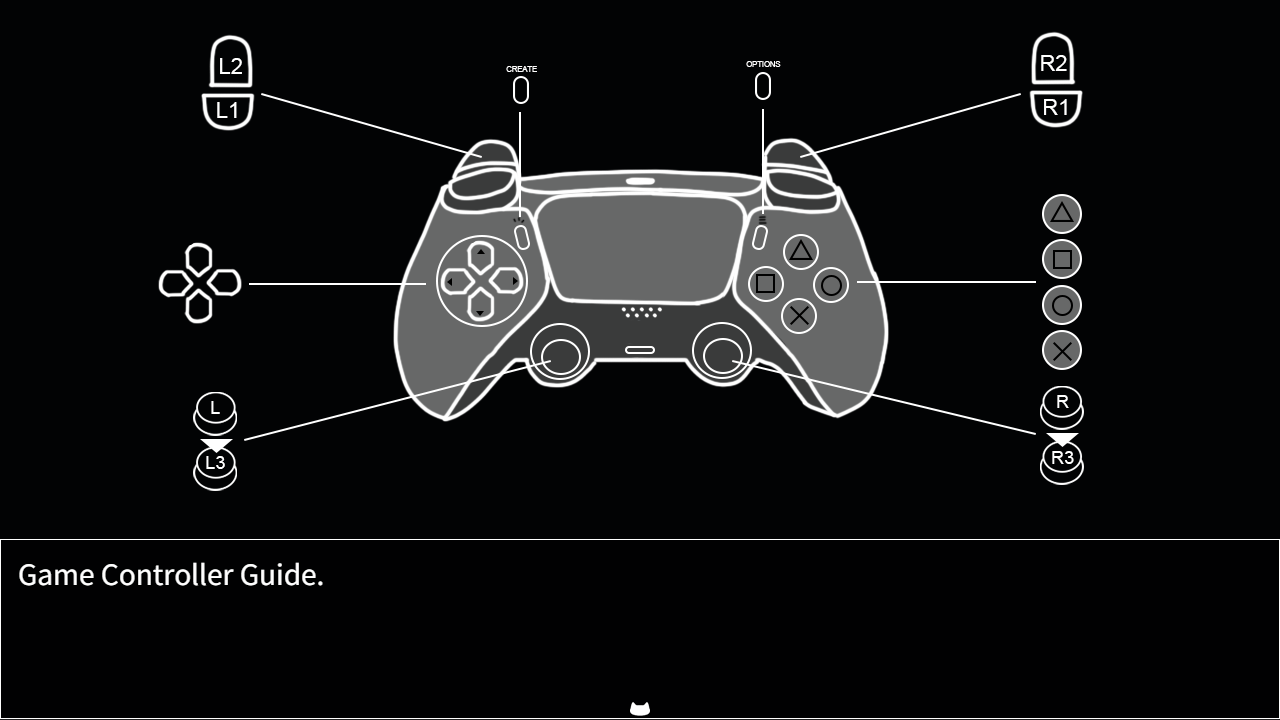
<style>
.page{position:relative;width:1280px;height:720px;background:#020304}
.page>*{position:absolute;margin:0}
.t1{font:22px "ArialMT";color:#ffffff}
.t2{font:7.6px "ArialMT";color:#ffffff}
.t3{font:18.4px "ArialMT";color:#ffffff}
</style>
<div class="page">
<p class="t1" style="left:220px;top:58px;width:22px;height:16px">L2</p>
<p class="t2" style="left:746px;top:61px;width:35px;height:6px">OPTIONS</p>
<p class="t1" style="left:1041px;top:55px;width:26px;height:16px">R2</p>
<p class="t2" style="left:506px;top:66px;width:31px;height:6px">CREATE</p>
<p class="t1" style="left:217px;top:102px;width:20px;height:16px">L1</p>
<p class="t1" style="left:1044px;top:99px;width:23px;height:16px">R1</p>
<p class="t3" style="left:211px;top:401px;width:9px;height:13px">L</p>
<p class="t3" style="left:1057px;top:395px;width:12px;height:13px">R</p>
<p class="t3" style="left:206px;top:456px;width:19px;height:13px">L3</p>
<p class="t3" style="left:1052px;top:451px;width:22px;height:13px">R3</p>
</div>
